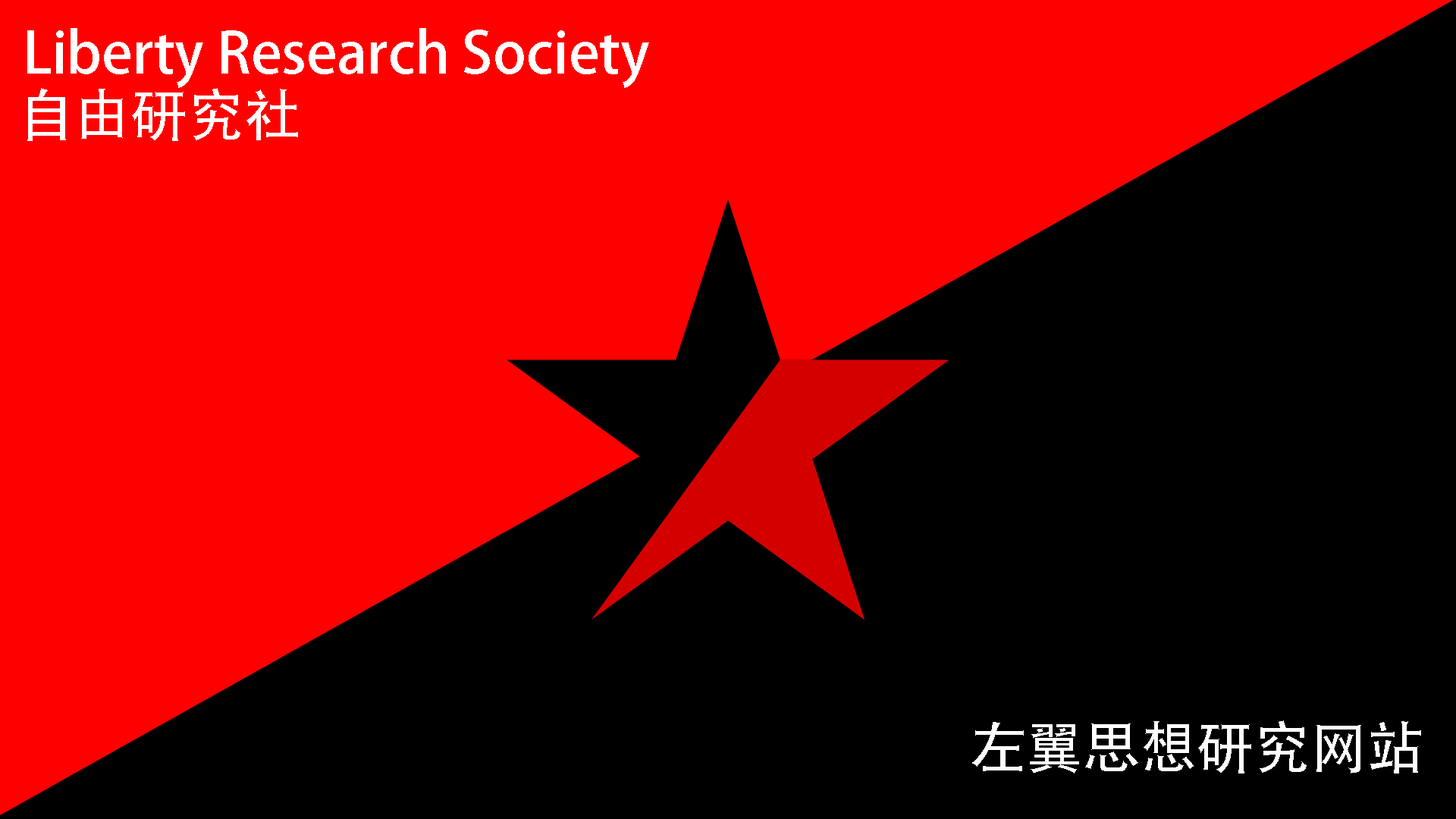
<style>
.page{position:relative;width:1456px;height:819px;background:#000000}
.page>*{position:absolute;margin:0}
.t1{font:56.9px "AdobeHeitiStd-Regular";color:#ffffff}
</style>
<div class="page">
<p class="t1" style="left:27px;top:28px;width:622px;height:60px">Liberty Research Society</p>
<p class="t1" style="left:27px;top:88px;width:271px;height:53px">自由研究社</p>
<p class="t1" style="left:972px;top:720px;width:449px;height:53px">左翼思想研究网站</p>
</div>
